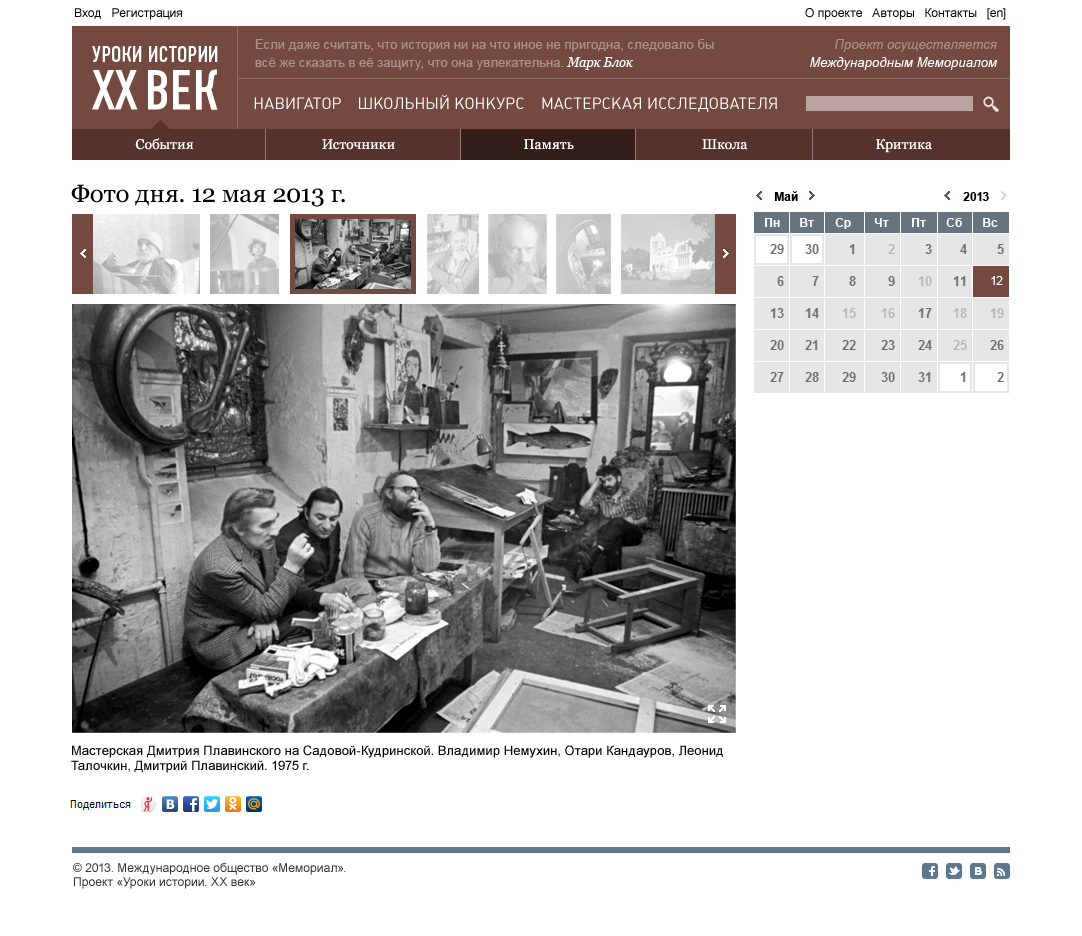
<style>
.page{position:relative;width:1082px;height:936px;background:#ffffff}
.page>*{position:absolute;margin:0}
.t1{font:12px "ArialMT";color:#000000}
.t2{font:13px/18px "ArialMT";color:#ab918c}
.t3{font:13px/18px "Georgia-Italic";color:#ffffff}
.t4{font:13px/18px "Arial-ItalicMT";color:#ffffff}
.t5{font:13px/18px "Arial-ItalicMT";color:#ab918c}
.t6{font:22.2px "DINCondensedC-Regular";color:#ffffff}
.t7{font:56.5px "DINCondensedC-Regular";color:#ffffff}
.t8{font:16px "Plumb-Regular";color:#ffffff;text-transform:uppercase}
.t9{font:14px "Georgia";color:#ffffff}
.t10{font:25px "Georgia";color:#000000}
.t11{font:12px "Arial-BoldMT";color:#000000}
.t12{font:12px "Arial-BoldMT";color:#ffffff}
.t13{font:12px "ArialMT";color:#ffffff}
.t14{font:13px/15px "ArialMT";color:#000000}
.t15{font:12px "ArialMT";color:#333333}
</style>
<div class="page">
<p class="t1" style="left:75px;top:8px;width:107px;height:12px">Вход   Регистрация</p>
<p class="t1" style="left:805px;top:8px;width:201px;height:12px">О проекте   Авторы   Контакты   [en]</p>
<p class="t2" style="left:255px;top:39px;width:459px;height:31px">Если даже считать, что история ни на что иное не пригодна, следовало бы <br>всё же сказать в её защиту, что она увлекательна. <span class="t3">Марк Блок</span></p>
<p class="t4" style="left:810px;top:39px;width:187px;height:31px;text-align:right"><span class="t5">Проект осуществляется<br></span>Международным Мемориалом</p>
<p class="t6" style="left:92px;top:46px;width:126px;height:16px">УРОКИ ИСТОРИИ</p>
<p class="t6" style="left:92px;top:46px;width:126px;height:16px">УРОКИ ИСТОРИИ</p>
<p class="t7" style="left:92px;top:69px;width:126px;height:41px">XX ВЕК</p>
<p class="t7" style="left:92px;top:69px;width:126px;height:41px">XX ВЕК</p>
<p class="t8" style="left:254px;top:94px;width:523px;height:18px">Навигатор    Школьный конкурс    Мастерская исследователя</p>
<p class="t9" style="left:135px;top:138px;width:797px;height:15px">События Источники Память Школа Критика</p>
<p class="t10" style="left:71px;top:184px;width:274px;height:23px">Фото дня. 12 мая 2013 г.</p>
<p class="t11" style="left:774px;top:191px;width:24px;height:10px">Май</p>
<p class="t11" style="left:963px;top:192px;width:26px;height:9px">2013</p>
<p class="t12" style="left:765px;top:218px;width:15px;height:9px">Пн</p>
<p class="t12" style="left:800px;top:218px;width:14px;height:9px">Вт</p>
<p class="t12" style="left:835px;top:218px;width:16px;height:11px">Ср</p>
<p class="t12" style="left:874px;top:218px;width:15px;height:9px">Чт</p>
<p class="t12" style="left:912px;top:218px;width:14px;height:9px">Пт</p>
<p class="t12" style="left:946px;top:218px;width:16px;height:9px">Сб</p>
<p class="t12" style="left:983px;top:218px;width:15px;height:9px">Вс</p>
<p class="t13" style="left:991px;top:276px;width:12px;height:9px">12</p>
<p class="t14" style="left:71px;top:745px;width:652px;height:28px">Мастерская Дмитрия Плавинского на Садовой-Кудринской. Владимир Немухин, Отари Кандауров, Леонид Талочкин, Дмитрий Плавинский. 1975 г.</p>
<p class="t15" style="left:73px;top:863px;width:273px;height:26px">© 2013. Международное общество «Мемориал».<br>Проект «Уроки истории. XX век»</p>
</div>
